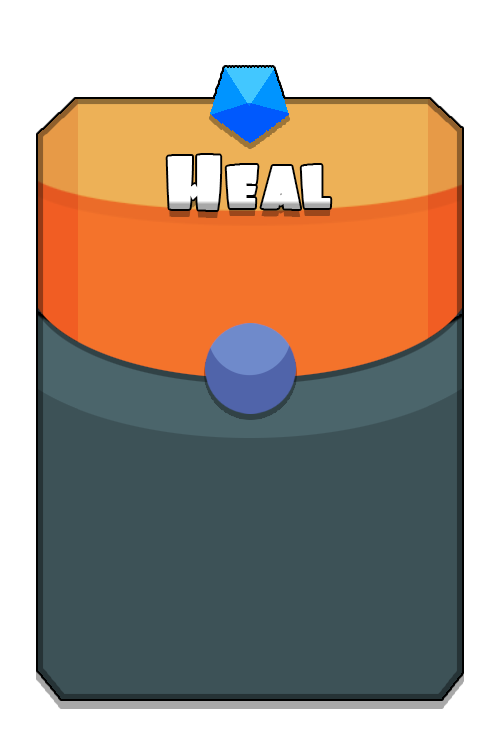
<style>
.page{position:relative;width:500px;height:738px;background:#ffffff}
.page>*{position:absolute;margin:0}
.t1{font:69px "Foo";color:#ffffff}
</style>
<div class="page">
<p class="t1" style="left:167px;top:155px;width:164px;height:55px">Heal</p>
</div>
